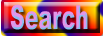
<style>
.page{position:relative;width:103px;height:36px}
.page>*{position:absolute;margin:0}
.t1{font:33.1px "Arial-Black";scale:0.62 1}
</style>
<div class="page">
<p class="t1" style="left:10px;top:4px;width:78px;height:26px">Search</p>
</div>
